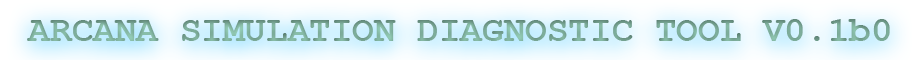
<style>
.page{position:relative;width:912px;height:60px}
.page>*{position:absolute;margin:0}
.t1{font:36px "CourierNewPS-BoldMT";color:#7bac99}
</style>
<div class="page">
<p class="t1" style="left:27px;top:19px;width:863px;height:22px">ARCANA SIMULATION DIAGNOSTIC TOOL V0.1b0</p>
</div>
